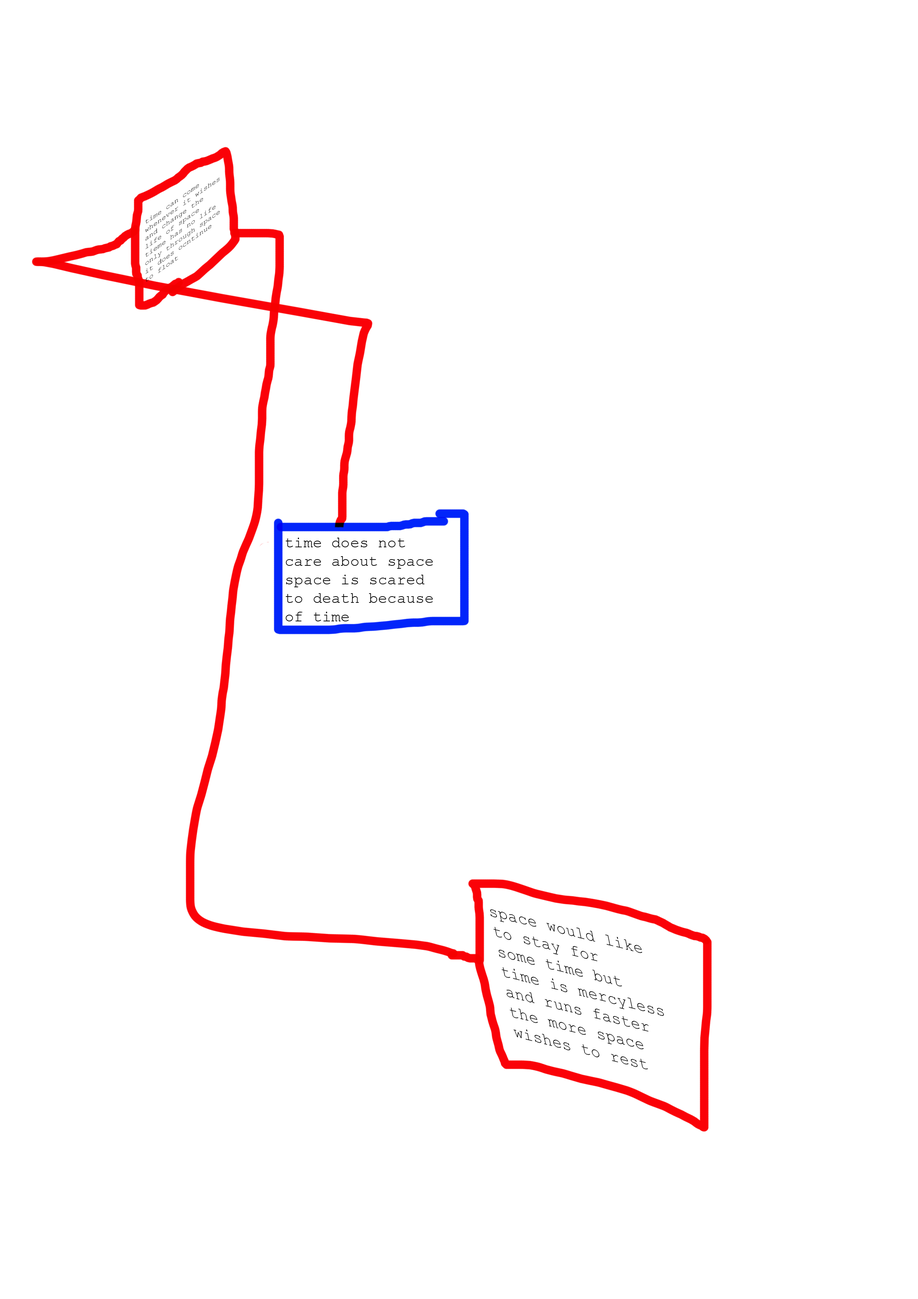
<style>
.page{position:relative;width:918px;height:1299px;background:#ffffff}
.page>*{position:absolute;margin:0}
.t1{font:6.9px "CourierNewPSMT";letter-spacing:0.005em;color:#050505;scale:1.22 1}
.t2{font:17.2px "CourierNewPSMT";letter-spacing:0.005em;color:#050505;scale:0.96 1}
</style>
<div class="page">
<p class="t1" style="left:145px;top:177px;width:75px;height:104px;rotate:-35deg">time can come<br>whenever it wishes<br>and change the<br>life of space<br>tieme has no life<br>only through space<br>it does ocntinue<br>to float</p>
<p class="t2" style="left:490px;top:909px;width:174px;height:160px;rotate:14deg">space would like <br>to stay for <br>some time but<br>time is mercyless<br>and runs faster<br>the more space<br>wishes to rest</p>
</div>
